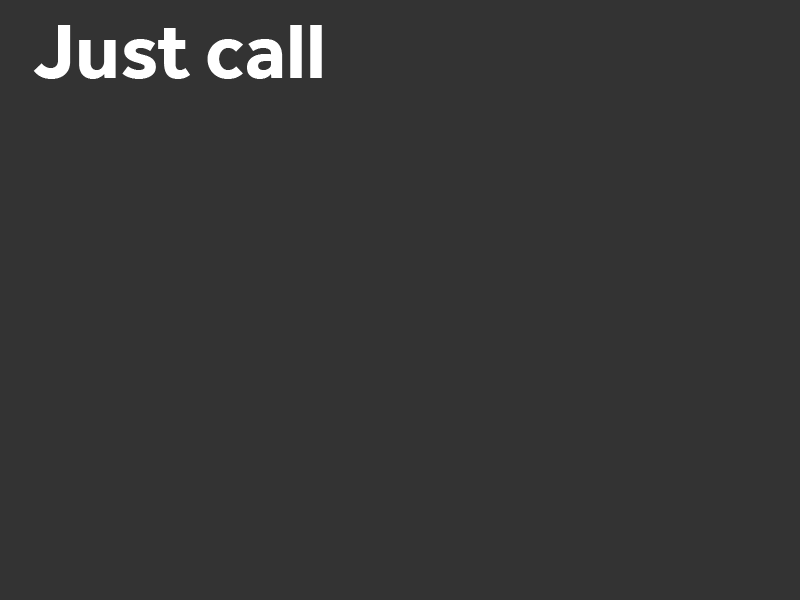
<style>
.page{position:relative;width:800px;height:600px;background:#333333}
.page>*{position:absolute;margin:0}
.t1{font:80.2px "Effra-Bold";color:#ffffff}
</style>
<div class="page">
<p class="t1" style="left:33px;top:25px;width:289px;height:54px">Just call</p>
</div>
